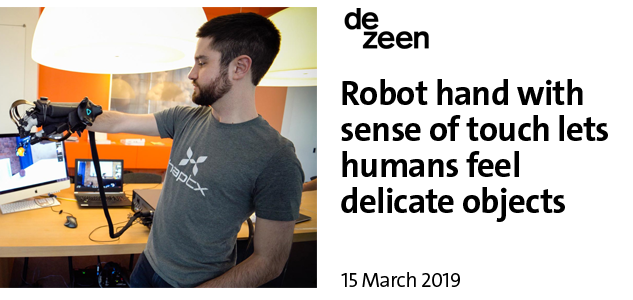
<style>
.page{position:relative;width:633px;height:300px;background:#ffffff}
.page>*{position:absolute;margin:0}
.t1{font:35px/36px "V&ATheSansC6s-Bold";letter-spacing:-0.02em;color:#000000}
.t2{font:20.8px "V&ATheSansC6s-SemiLight";letter-spacing:-0.02em;color:#000000}
</style>
<div class="page">
<p class="t1" style="left:341px;top:79px;width:267px;height:143px">Robot hand with<br>sense of touch lets<br>humans feel<br>delicate objects</p>
<p class="t2" style="left:341px;top:272px;width:119px;height:15px">15 March 2019</p>
</div>
